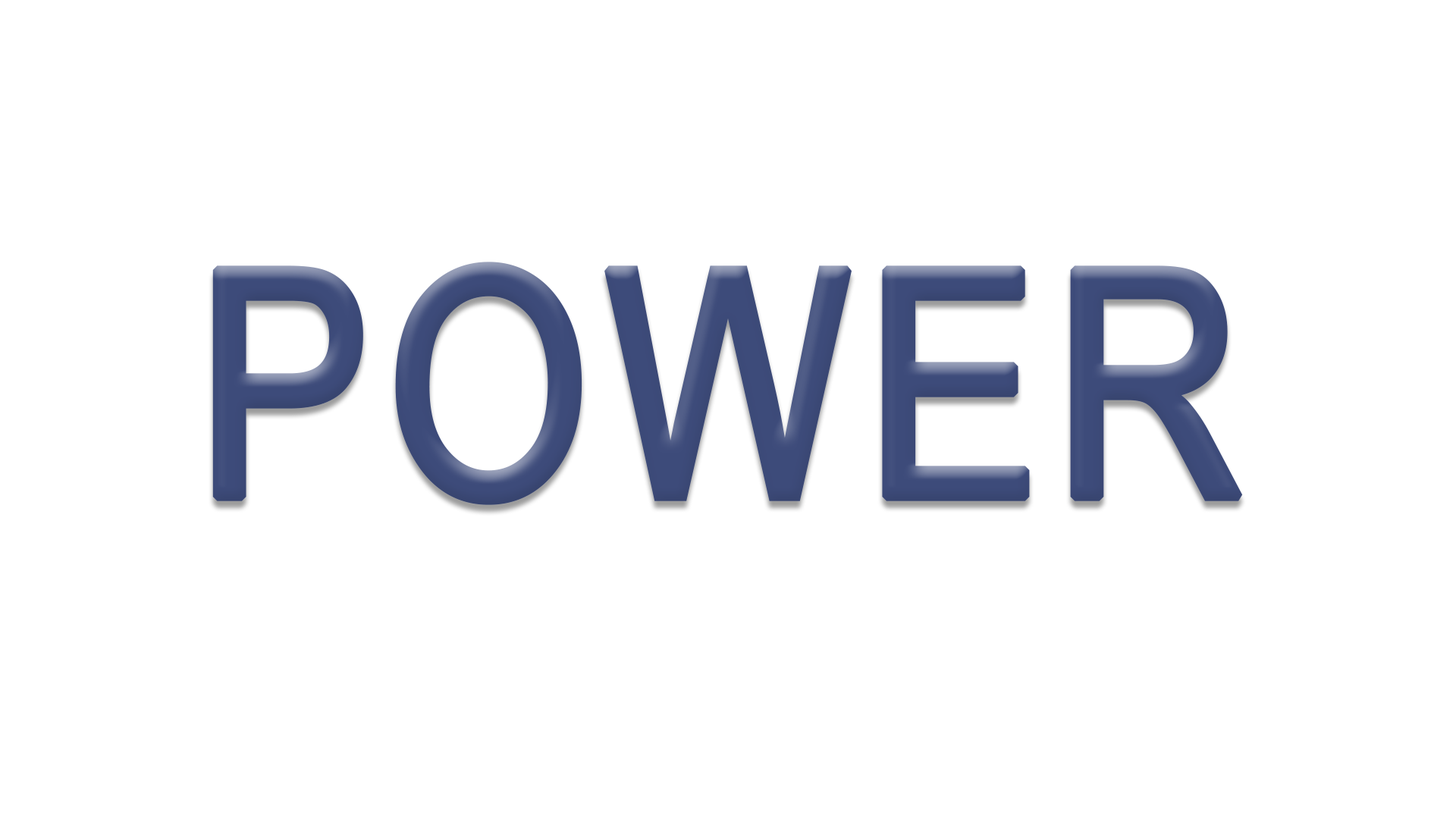
<style>
.page{position:relative;width:1456px;height:819px;background:#ffffff}
.page>*{position:absolute;margin:0}
.t1{font:316px "ArialNarrow";letter-spacing:0.025em;color:#3d4b7a;font-weight:bold}
</style>
<div class="page">
<p class="t1" style="left:212px;top:262px;width:1031px;height:243px">POWER</p>
</div>
